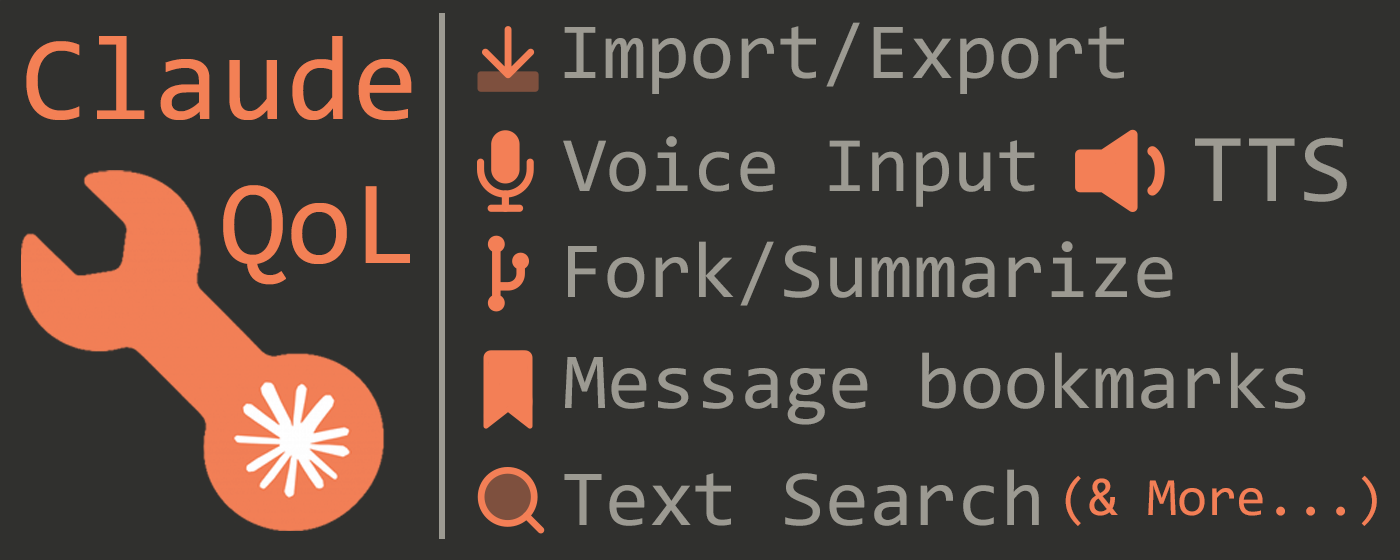
<style>
.page{position:relative;width:1400px;height:560px;background:#30302e}
.page>*{position:absolute;margin:0}
.t1{font:80px "Consolas";letter-spacing:0.001em;color:#9c9a92}
.t2{font:120.3px/143.8px "Consolas";letter-spacing:0.001em;color:#f38055}
.t3{font:78.7px "Consolas";letter-spacing:0.001em;color:#9c9a92}
.t4{font:97.7px "Consolas";letter-spacing:0.001em;color:#9c9a92}
.t5{font:54px "Consolas";letter-spacing:0.001em;color:#f37f56}
</style>
<div class="page">
<p class="t1" style="left:564px;top:22px;width:560px;height:72px">Import/Export</p>
<p class="t2" style="left:26px;top:36px;width:386px;height:249px;text-align:right">Claude<br>QoL</p>
<p class="t3" style="left:563px;top:136px;width:472px;height:71px">Voice Input</p>
<p class="t4" style="left:1195px;top:137px;width:152px;height:65px">TTS</p>
<p class="t1" style="left:568px;top:241px;width:605px;height:65px">Fork/Summarize</p>
<p class="t1" style="left:565px;top:352px;width:741px;height:73px">Message bookmarks</p>
<p class="t1" style="left:564px;top:469px;width:475px;height:57px">Text Search</p>
<p class="t5" style="left:1065px;top:475px;width:312px;height:51px">(&amp; More...)</p>
</div>
